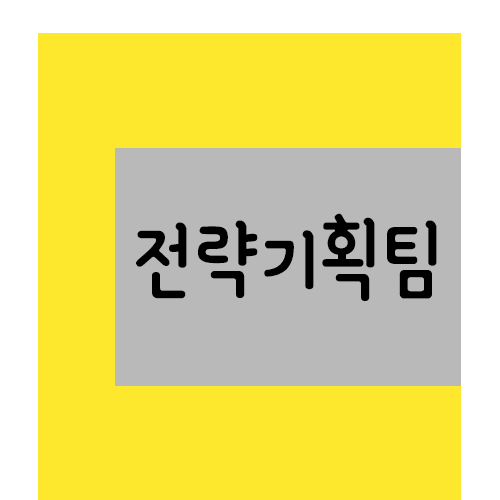
<style>
.page{position:relative;width:500px;height:500px;background:#fee82d}
.page>*{position:absolute;margin:0}
.t1{font:100px "YanoljaYacheR";color:#000000}
</style>
<div class="page">
<p class="t1" style="left:136px;top:213px;width:301px;height:88px">전략기획팀</p>
</div>
